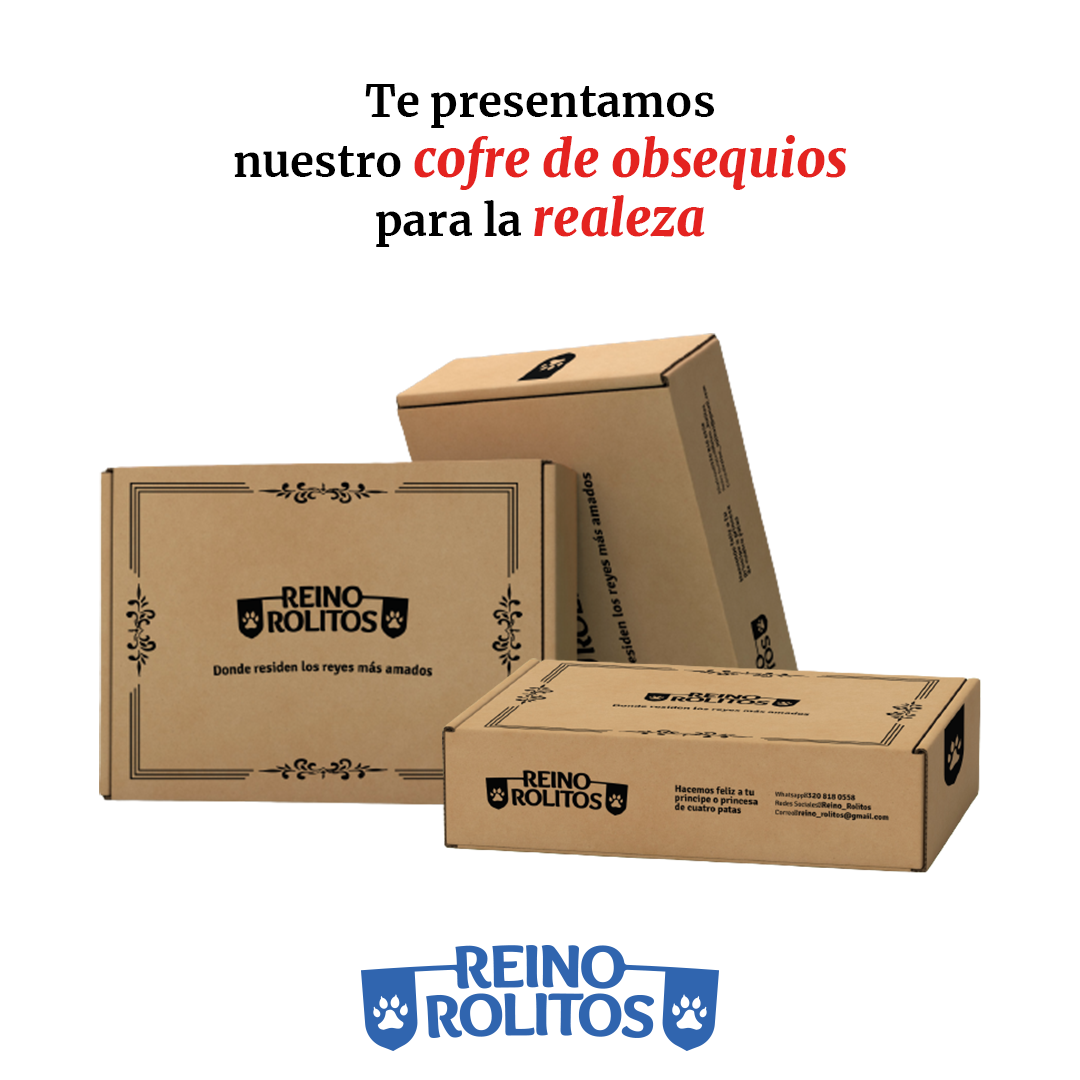
<style>
.page{position:relative;width:1080px;height:1080px;background:#ffffff}
.page>*{position:absolute;margin:0}
.t1{font:43.6px/59.5px "Merriweather-Bold";color:#000000}
.t2{font:50px/59.5px "Merriweather-BlackItalic";color:#e42320}
</style>
<div class="page">
<p class="t1" style="left:234px;top:84px;width:613px;height:163px;text-align:center">Te presentamos<br>nuestro <span class="t2">cofre de obsequios<br></span>para la <span class="t2">realeza</span></p>
</div>
